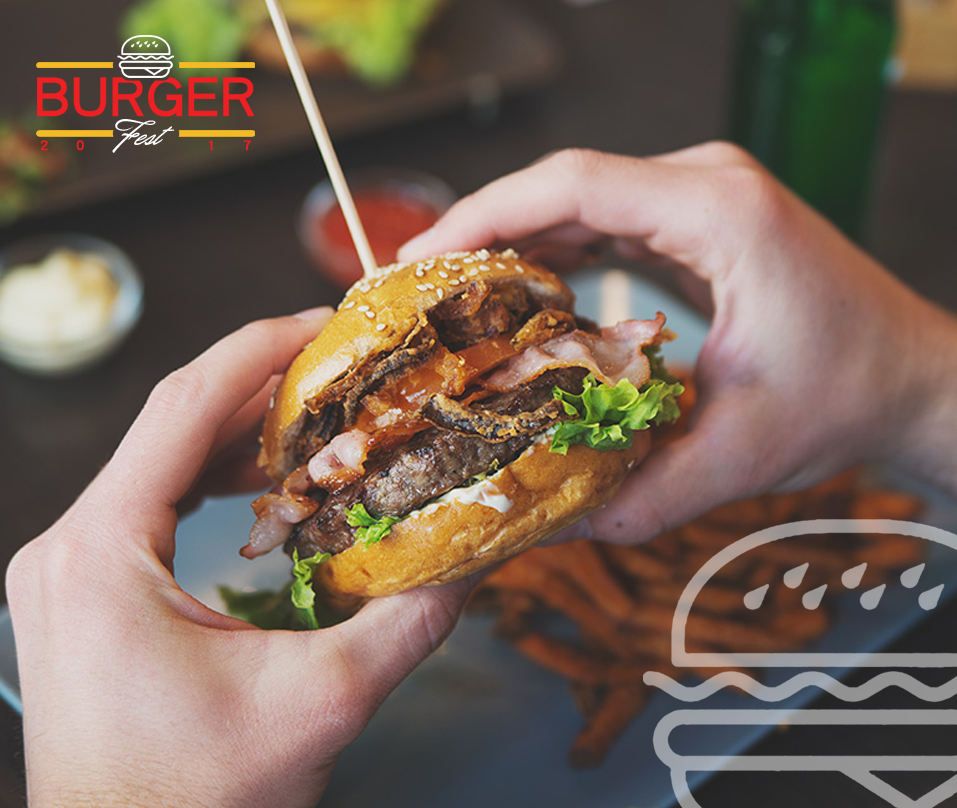
<style>
.page{position:relative;width:957px;height:808px}
.page>*{position:absolute;margin:0}
.t1{font:22.2px "CarolinaHillsPersonalUse";color:#ffffff}
.t2{font:22.2px "CenturyGothic";color:#25b34b}
.t3{font:13px "LiHeiPro";letter-spacing:2.08em;color:#ed1f24;font-weight:bold}
</style>
<div class="page">
<p class="t1" style="left:112px;top:119px;width:63px;height:34px"><span class="t2"> </span>Fest</p>
<p class="t3" style="left:40px;top:140px;width:211px;height:11px">20   17</p>
</div>
